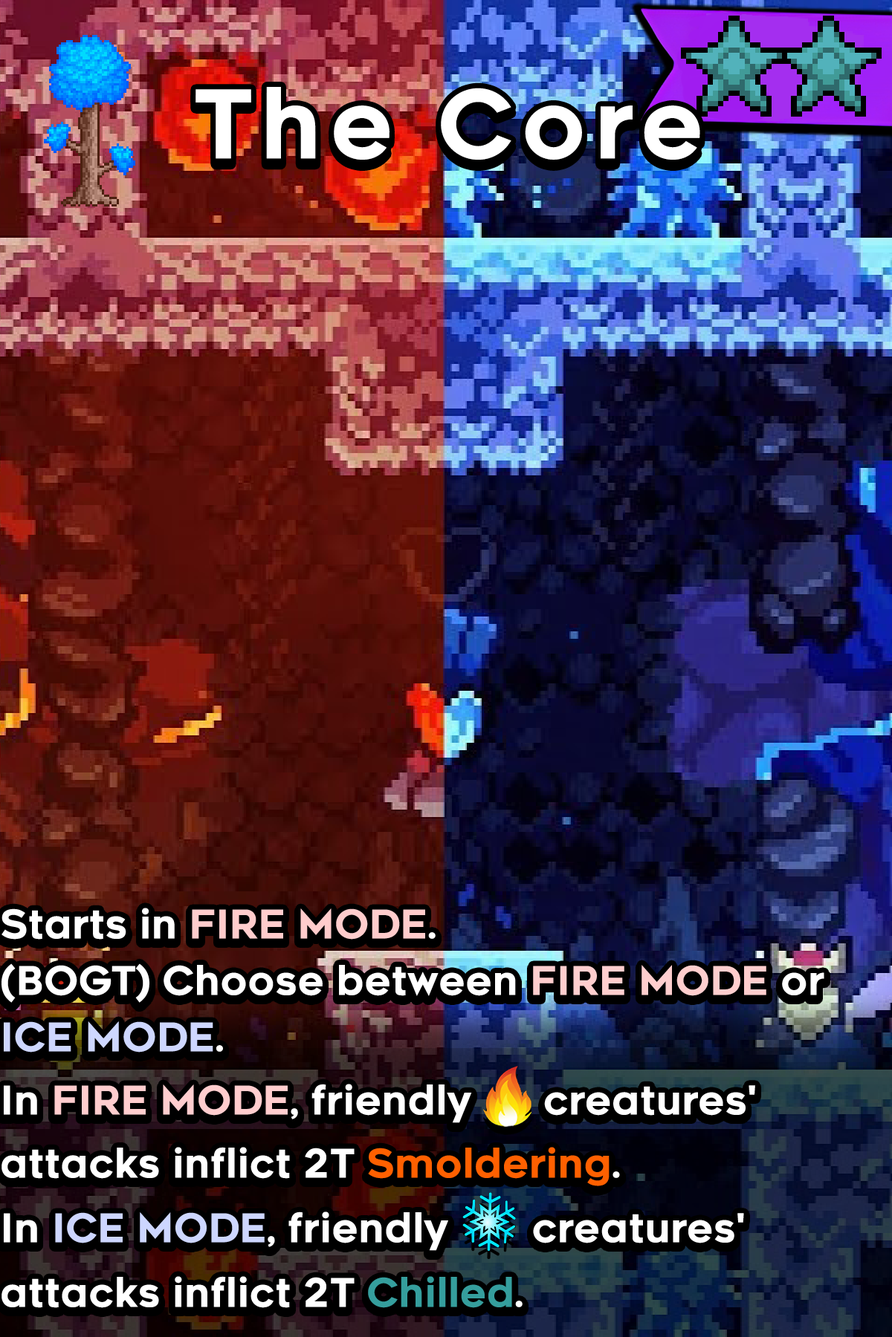
<style>
.page{position:relative;width:892px;height:1337px}
.page>*{position:absolute;margin:0}
.t1{font:161.7px "Renogare-Regular";letter-spacing:0.08em;color:#ffffff}
.t2{font:67.6px/64.6px "Renogare-Regular";color:#ffffff}
.t3{font:67.6px/56.5px "Renogare-Regular";color:#ffffff}
.t4{font:67.6px/56.5px "Renogare-Regular";color:#ffcccc}
.t5{font:67.6px/56.5px "Renogare-Regular";color:#ffcece}
.t6{font:67.6px/56.5px "Renogare-Regular";color:#ced7ff}
.t7{font:67.6px/63.2px "Renogare-Regular";color:#ffffff}
.t8{font:67.6px/63.2px "Renogare-Regular";color:#ffcdce}
.t9{font:67.6px/56.5px "Renogare-Regular";color:#ff6000}
.t10{font:67.6px/64.6px "Renogare-Regular";color:#cdd6ff}
.t11{font:67.6px/56.5px "Renogare-Regular";color:#359e9d}
</style>
<div class="page">
<p class="t1" style="left:195px;top:87px;width:505px;height:73px">The Core</p>
<p class="t2" style="left:1px;top:908px;width:823px;height:400px"><span class="t3">Starts in </span><span class="t4">FIRE MODE</span><span class="t3">.<br>(BOGT) Choose between </span><span class="t5">FIRE MODE</span><span class="t3"> or </span><span class="t6">ICE MODE</span><span class="t3">.<br></span><span class="t7">In </span><span class="t8">FIRE MODE</span><span class="t7">, friendly      creatures' attacks inflict </span><span class="t3">2T </span><span class="t9">Smoldering</span><span class="t3">.<br></span>In <span class="t10">ICE MODE</span>, friendly       creatures' attacks inflict <span class="t3">2T </span><span class="t11">Chilled</span><span class="t3">.</span></p>
</div>
